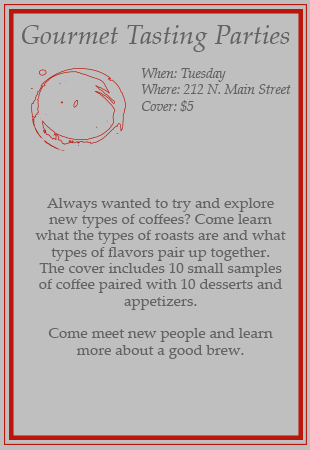
<style>
.page{position:relative;width:310px;height:450px;background:#bfbfbf}
.page>*{position:absolute;margin:0}
.t1{font:27.2px "PalatinoLinotype-Italic";color:#636363}
.t2{font:13.6px "PalatinoLinotype-Italic";color:#636363}
.t3{font:14.3px "PalatinoLinotype-Roman";letter-spacing:0.005em;color:#636363;scale:1.05 1}
</style>
<div class="page">
<p class="t1" style="left:22px;top:25px;width:268px;height:27px">Gourmet Tasting Parties</p>
<p class="t2" style="left:141px;top:68px;width:150px;height:44px">When: Tuesday<br>Where: 212 N. Main Street<br>Cover: $5</p>
<p class="t3" style="left:35px;top:198px;width:251px;height:161px;text-align:center">Always wanted to try and explore new types of coffees? Come learn what the types of roasts are and what types of flavors pair up together.<br>The cover includes 10 small samples of coffee paired with 10 desserts and appetizers. <br><br>Come meet new people and learn more about a good brew.</p>
</div>
